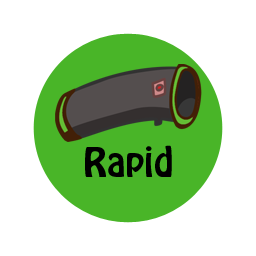
<style>
.page{position:relative;width:256px;height:256px;background:#ffffff}
.page>*{position:absolute;margin:0}
.t1{font:36px "HoboStd";color:#000000}
</style>
<div class="page">
<p class="t1" style="left:85px;top:145px;width:87px;height:32px">Rapid</p>
</div>
